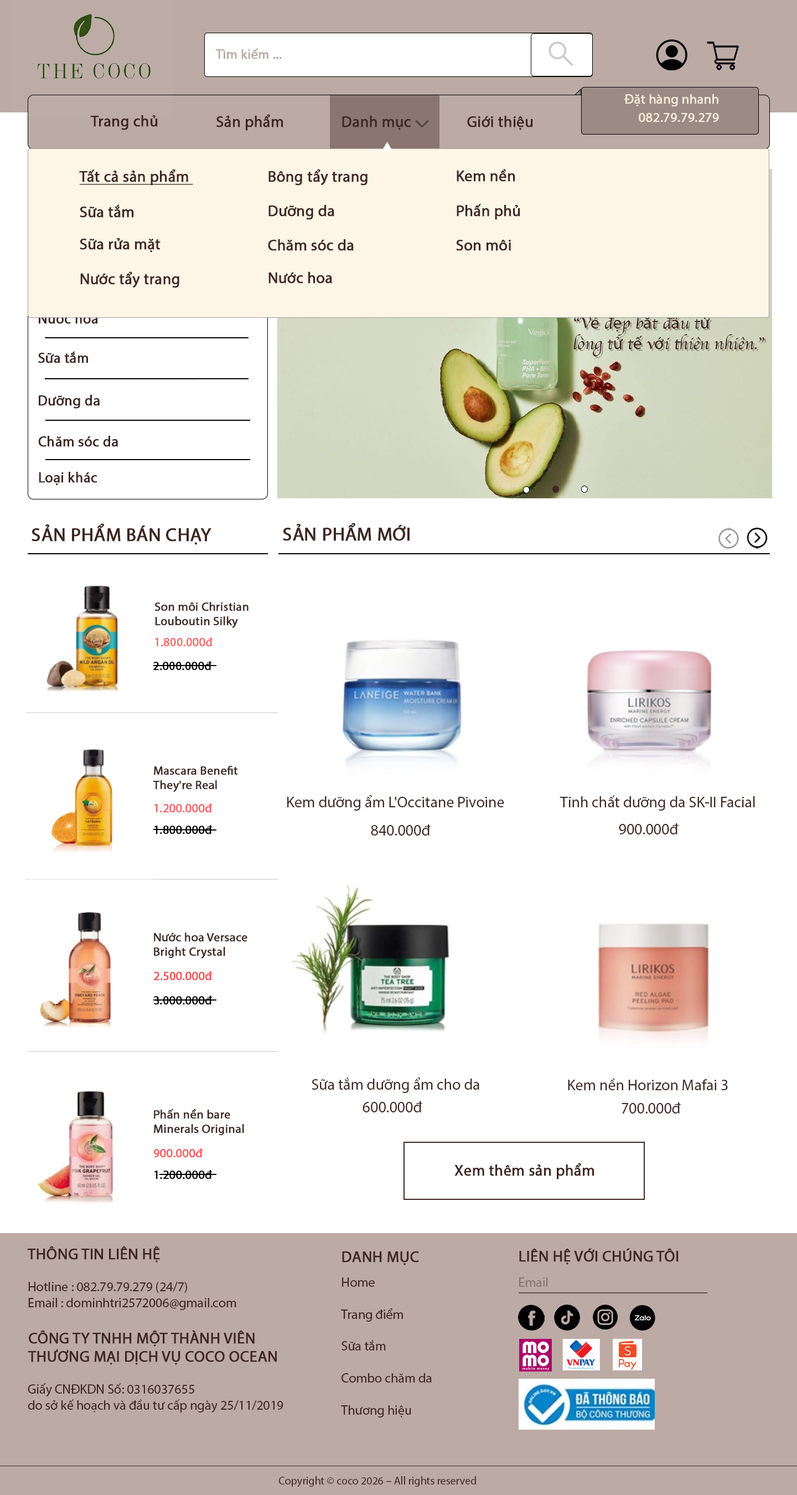
<style>
.page{position:relative;width:797px;height:1495px;background:#ffffff}
.page>*{position:absolute;margin:0}
.t1{font:13.3px "MyriadPro-Regular";color:#bcaaa4;font-weight:bold}
.t2{font:13.3px "MyriadPro-Regular";color:#f5e9d8;font-weight:bold}
.t3{font:15.5px "MyriadPro-Regular";color:#3e2723;font-weight:bold}
.t4{font:15.5px "MyriadPro-Regular";color:#3e2723;font-weight:bold;text-decoration:underline}
.t5{font:14.4px "MyriadPro-Regular";color:#3e2723;font-weight:bold}
.t6{font:18.8px "MyriadPro-Regular";color:#3e2723;font-weight:bold}
.t7{font:12.2px "MyriadPro-Regular";color:#3e2723;font-weight:bold}
.t8{font:12.2px "MyriadPro-Regular";color:#ff6767;font-weight:bold}
.t9{font:12.2px "MyriadPro-Regular";color:#000000;font-weight:bold}
.t10{font:15.5px "MyriadPro-Regular";color:#3e2723}
.t11{font:12.2px "MyriadPro-Regular";color:#ff5e5e;font-weight:bold}
.t12{font:12.2px "MyriadPro-Regular";color:#f94a4a;font-weight:bold}
.t13{font:12.2px "MyriadPro-Regular";color:#ff5555;font-weight:bold}
.t14{font:13.3px "MyriadPro-Regular";color:#3e2723}
.t15{font:13.3px "MyriadPro-Regular";color:#86746f}
.t16{font:11.1px "MyriadPro-Regular";color:#3e2723}
</style>
<div class="page">
<p class="t1" style="left:215px;top:48px;width:67px;height:11px">Tìm kiếm ...</p>
<p class="t2" style="left:625px;top:94px;width:94px;height:13px">Đặt hàng nhanh</p>
<p class="t2" style="left:639px;top:113px;width:80px;height:9px">082.79.79.279</p>
<p class="t3" style="left:90px;top:115px;width:68px;height:15px">Trang chủ</p>
<p class="t3" style="left:217px;top:114px;width:67px;height:17px">Sản phẩm</p>
<p class="t3" style="left:342px;top:116px;width:69px;height:14px">Danh mục</p>
<p class="t3" style="left:467px;top:116px;width:66px;height:14px">Giới thiệu</p>
<p class="t4" style="left:79px;top:169px;width:114px;height:17px">Tất cả sản phẩm</p>
<p class="t3" style="left:269px;top:169px;width:99px;height:17px">Bông tẩy trang</p>
<p class="t3" style="left:457px;top:169px;width:59px;height:13px">Kem nền</p>
<p class="t3" style="left:80px;top:204px;width:54px;height:14px">Sữa tắm</p>
<p class="t3" style="left:269px;top:205px;width:65px;height:15px">Dưỡng da</p>
<p class="t3" style="left:457px;top:204px;width:64px;height:16px">Phấn phủ</p>
<p class="t3" style="left:80px;top:238px;width:81px;height:15px">Sữa rửa mặt</p>
<p class="t3" style="left:268px;top:239px;width:86px;height:12px">Chăm sóc da</p>
<p class="t3" style="left:456px;top:240px;width:55px;height:11px">Son môi</p>
<p class="t3" style="left:80px;top:271px;width:99px;height:17px">Nước tẩy trang</p>
<p class="t3" style="left:269px;top:272px;width:63px;height:12px">Nước hoa</p>
<p class="t5" style="left:39px;top:313px;width:59px;height:11px">Nước hoa</p>
<p class="t5" style="left:38px;top:352px;width:50px;height:11px">Sữa tắm</p>
<p class="t5" style="left:39px;top:395px;width:61px;height:14px">Dưỡng da</p>
<p class="t5" style="left:38px;top:436px;width:80px;height:11px">Chăm sóc da</p>
<p class="t5" style="left:39px;top:472px;width:58px;height:14px">Loại khác</p>
<p class="t6" style="left:32px;top:523px;width:180px;height:22px">SẢN PHẨM BÁN CHẠY</p>
<p class="t6" style="left:283px;top:523px;width:127px;height:18px">SẢN PHẨM MỚI</p>
<p class="t7" style="left:155px;top:602px;width:94px;height:26px">Son môi Christian <br>Louboutin Silky</p>
<p class="t8" style="left:155px;top:637px;width:58px;height:10px">1.800.000đ</p>
<p class="t9" style="left:153px;top:661px;width:59px;height:10px">2.000.000đ</p>
<p class="t7" style="left:153px;top:766px;width:85px;height:26px">Mascara Benefit <br>They're Real</p>
<p class="t10" style="left:287px;top:795px;width:218px;height:16px">Kem dưỡng ẩm L'Occitane Pivoine</p>
<p class="t10" style="left:560px;top:795px;width:195px;height:16px">Tinh chất dưỡng da SK-II Facial</p>
<p class="t11" style="left:155px;top:804px;width:58px;height:9px">1.200.000đ</p>
<p class="t9" style="left:155px;top:825px;width:58px;height:10px">1.800.000đ</p>
<p class="t10" style="left:371px;top:825px;width:60px;height:11px">840.000đ</p>
<p class="t10" style="left:619px;top:824px;width:60px;height:11px">900.000đ</p>
<p class="t7" style="left:154px;top:933px;width:94px;height:26px">Nước hoa Versace <br>Bright Crystal</p>
<p class="t12" style="left:154px;top:971px;width:59px;height:10px">2.500.000đ</p>
<p class="t9" style="left:154px;top:996px;width:59px;height:9px">3.000.000đ</p>
<p class="t10" style="left:312px;top:1077px;width:168px;height:16px">Sữa tắm dưỡng ẩm cho da</p>
<p class="t10" style="left:568px;top:1078px;width:160px;height:12px">Kem nền Horizon Mafai 3</p>
<p class="t7" style="left:154px;top:1109px;width:90px;height:27px">Phấn nền bare <br>Minerals Original</p>
<p class="t10" style="left:363px;top:1102px;width:60px;height:11px">600.000đ</p>
<p class="t10" style="left:622px;top:1103px;width:59px;height:11px">700.000đ</p>
<p class="t13" style="left:153px;top:1149px;width:50px;height:9px">900.000đ</p>
<p class="t3" style="left:455px;top:1163px;width:140px;height:17px">Xem thêm sản phẩm</p>
<p class="t9" style="left:155px;top:1170px;width:58px;height:10px">1.200.000đ</p>
<p class="t14" style="left:27px;top:1246px;width:209px;height:64px"><span class="t3">THÔNG TIN LIÊN HỆ <br><br></span>Hotline : 082.79.79.279 (24/7)<br>Email : dominhtri2572006@gmail.com</p>
<p class="t3" style="left:342px;top:1252px;width:77px;height:13px">DANH MỤC</p>
<p class="t3" style="left:519px;top:1248px;width:160px;height:17px">LIÊN HỆ VỚI CHÚNG TÔI</p>
<p class="t14" style="left:341px;top:1278px;width:91px;height:140px">Home <br><br>Trang điểm <br><br>Sữa tắm <br><br>Combo chăm da<br><br>Thương hiệu</p>
<p class="t15" style="left:519px;top:1278px;width:29px;height:9px">Email</p>
<p class="t3" style="left:28px;top:1330px;width:249px;height:35px">CÔNG TY TNHH MỘT THÀNH VIÊN <br>THƯƠNG MẠI DỊCH VỤ COCO OCEAN</p>
<p class="t14" style="left:28px;top:1383px;width:256px;height:30px">Giấy CNĐKDN Số: 0316037655 <br>do sở kế hoạch và đầu tư cấp ngày 25/11/2019</p>
<p class="t16" style="left:279px;top:1476px;width:197px;height:11px">Copyright © coco 2026 – All rights reserved</p>
</div>
